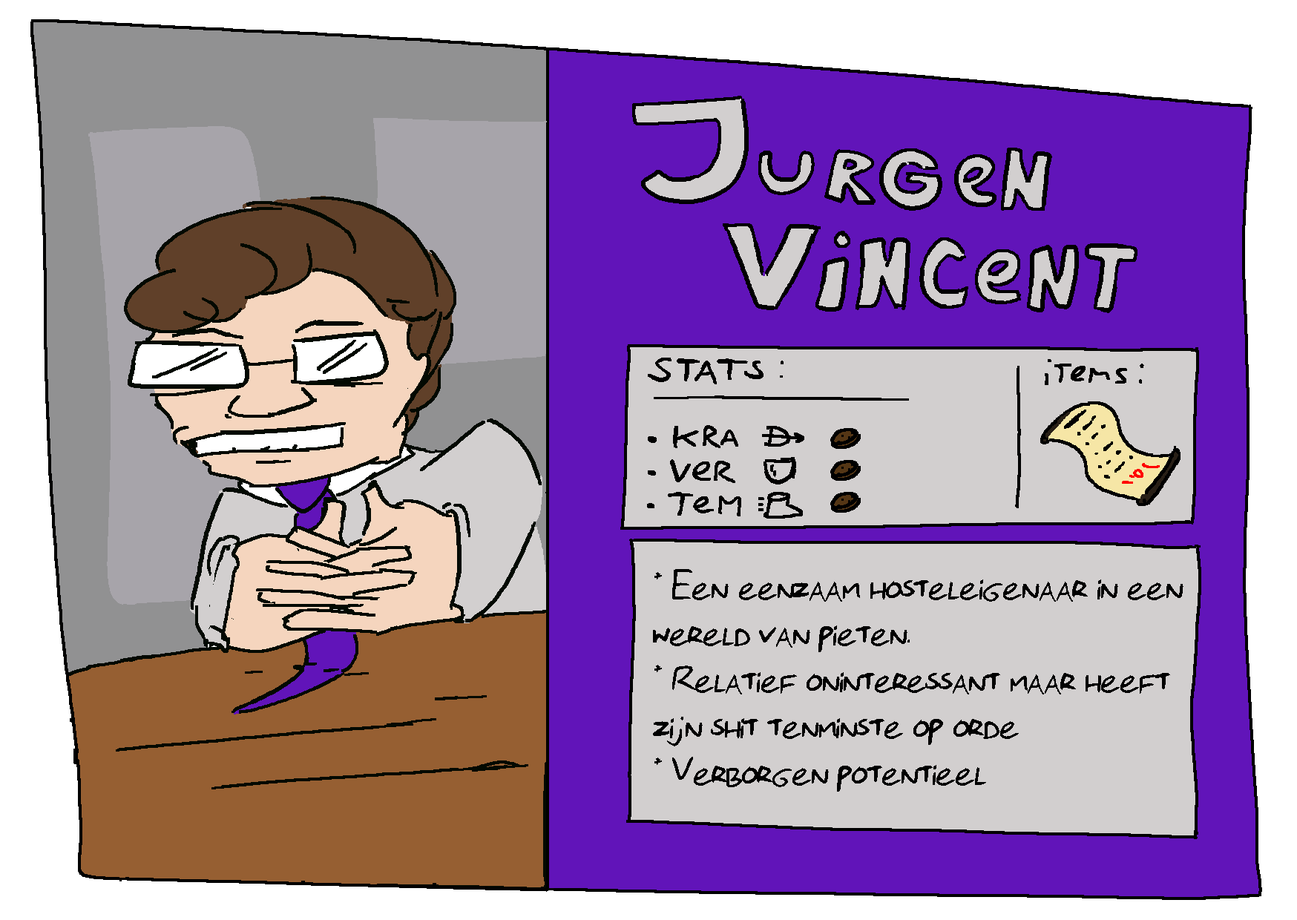
<style>
.page{position:relative;width:1297px;height:920px;background:#6114b9}
.page>*{position:absolute;margin:0}
.t1{font:40.2px/46.4px "Florisfont2-Regular";color:#000000}
</style>
<div class="page">
<p class="t1" style="left:653px;top:569px;width:530px;height:222px">* Een eenzaam hosteleigenaar in een<br>wereld van pieten.<br>* Relatief oninteressant maar heeft <br>zijn shit tenminste op orde<br>* Verborgen potentieel</p>
</div>
